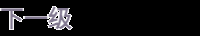
<style>
.page{position:relative;width:200px;height:36px;background:#000000}
.page>*{position:absolute;margin:0}
.t1{font:24px "WebPSD-18463539-0-Regular";color:#837a91;font-weight:bold}
</style>
<div class="page">
<p class="t1" style="left:0px;top:0px;width:200px;height:36px">下一级</p>
</div>
